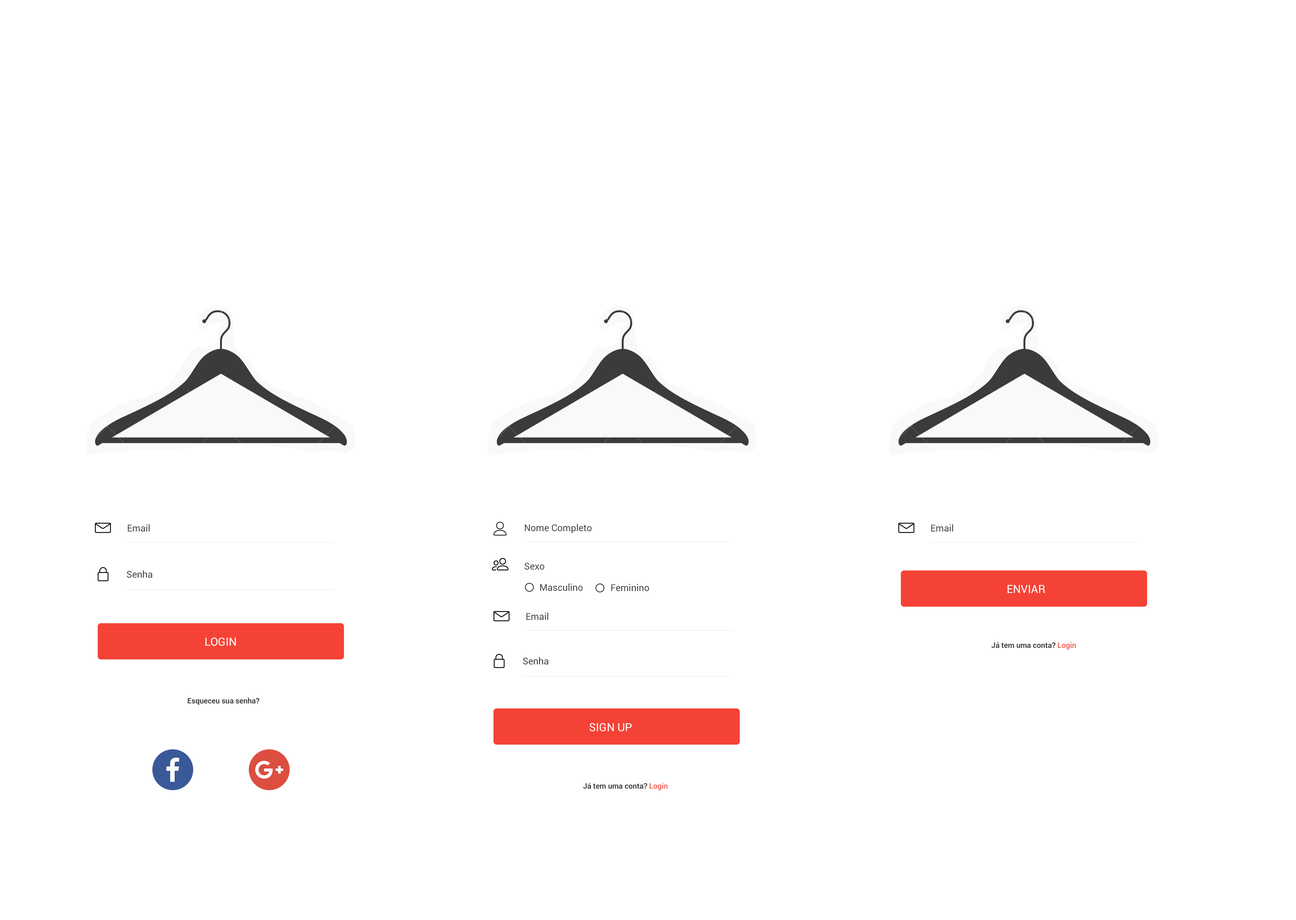
<style>
.page{position:relative;width:1296px;height:920px;background:#ffffff}
.page>*{position:absolute;margin:0}
.t1{font:9.4px "Roboto-Regular";color:#424242}
.t2{font:11.2px "Roboto-Regular";color:#fefefe}
.t3{font:7.5px "Roboto-Bold";color:#424242}
</style>
<div class="page">
<p class="t1" style="left:128px;top:524px;width:22px;height:8px">Email</p>
<p class="t1" style="left:525px;top:524px;width:66px;height:9px">Nome Completo</p>
<p class="t1" style="left:931px;top:524px;width:22px;height:8px">Email</p>
<p class="t1" style="left:524px;top:563px;width:20px;height:7px">Sexo</p>
<p class="t1" style="left:127px;top:571px;width:25px;height:7px">Senha</p>
<p class="t1" style="left:540px;top:584px;width:43px;height:7px">Masculino</p>
<p class="t1" style="left:611px;top:584px;width:38px;height:7px">Feminino</p>
<p class="t2" style="left:1008px;top:585px;width:37px;height:8px">ENVIAR</p>
<p class="t1" style="left:526px;top:613px;width:22px;height:7px">Email</p>
<p class="t2" style="left:205px;top:638px;width:31px;height:8px">LOGIN</p>
<p class="t3" style="left:991px;top:642px;width:85px;height:8px">Já tem uma conta? Login</p>
<p class="t1" style="left:523px;top:657px;width:25px;height:8px">Senha</p>
<p class="t3" style="left:188px;top:698px;width:71px;height:7px">Esqueceu sua senha?</p>
<p class="t2" style="left:590px;top:723px;width:42px;height:9px">SIGN UP</p>
<p class="t3" style="left:583px;top:783px;width:85px;height:8px">Já tem uma conta? Login</p>
</div>
